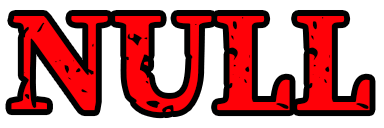
<style>
.page{position:relative;width:384px;height:128px;background:#ffffff}
.page>*{position:absolute;margin:0}
.t1{font:123.2px "Genkaimincho";color:#ff0108}
</style>
<div class="page">
<p class="t1" style="left:11px;top:16px;width:359px;height:97px">NULL</p>
</div>
